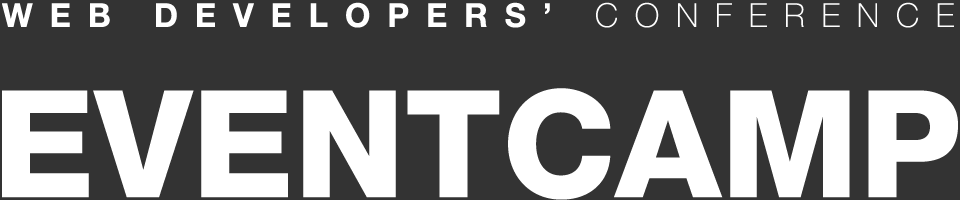
<style>
.page{position:relative;width:960px;height:200px;background:#333333}
.page>*{position:absolute;margin:0}
.t1{font:32.9px "HelveticaNeue-Bold";letter-spacing:0.52em;color:#ffffff;text-transform:uppercase}
.t2{font:32.9px "HelveticaNeue-Thin";letter-spacing:0.52em;color:#ffffff;text-transform:uppercase}
.t3{font:149.4px "HelveticaNeue-Heavy";color:#ffffff;text-transform:uppercase}
</style>
<div class="page">
<p class="t1" style="left:2px;top:2px;width:952px;height:26px">WEB DEVELOPERS’<span class="t2"> CONFERENCE</span></p>
<p class="t3" style="left:2px;top:88px;width:956px;height:112px">EVENTCAMP</p>
</div>
